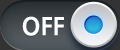
<style>
.page{position:relative;width:120px;height:50px}
.page>*{position:absolute;margin:0}
.t1{font:23.8px "NanumGothicOTFExtraBold";color:#ffffff}
</style>
<div class="page">
<p class="t1" style="left:22px;top:16px;width:42px;height:20px">OFF</p>
</div>
